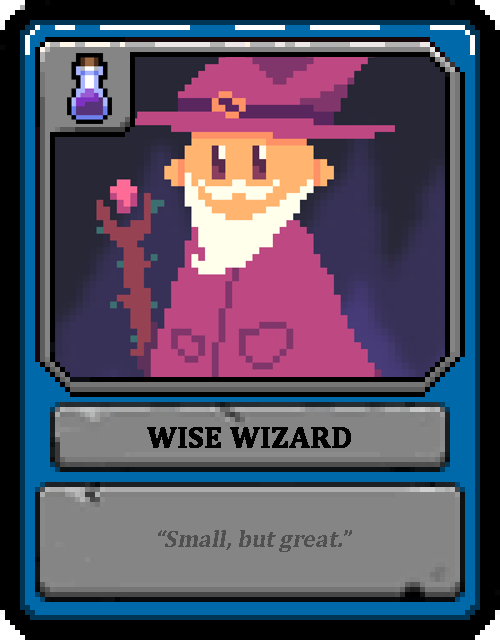
<style>
.page{position:relative;width:500px;height:640px;background:#000000}
.page>*{position:absolute;margin:0}
.t1{font:30px "Cambria-Bold";color:#000000;text-transform:uppercase;font-weight:bold}
.t2{font:24px "Cambria-Bold";color:#505050;font-style:italic}
</style>
<div class="page">
<p class="t1" style="left:147px;top:427px;width:204px;height:21px">Wise Wizard</p>
<p class="t2" style="left:158px;top:530px;width:194px;height:22px">“Small, but great.”</p>
</div>
